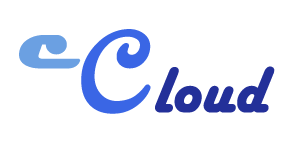
<style>
.page{position:relative;width:300px;height:142px;background:#ffffff}
.page>*{position:absolute;margin:0}
.t1{font:159.8px "Harrington";color:#3a66e5;font-weight:bold;font-style:italic}
.t2{font:94.3px "Magneto-Bold";color:#6ba0e2;font-weight:bold}
.t3{font:65.9px "HarlowSolid";color:#233099;font-weight:bold}
</style>
<div class="page">
<p class="t1" style="left:81px;top:29px;width:70px;height:85px;rotate:-5deg">c</p>
<p class="t2" style="left:19px;top:35px;width:62px;height:34px">c</p>
<p class="t3" style="left:155px;top:66px;width:120px;height:47px">loud</p>
</div>
